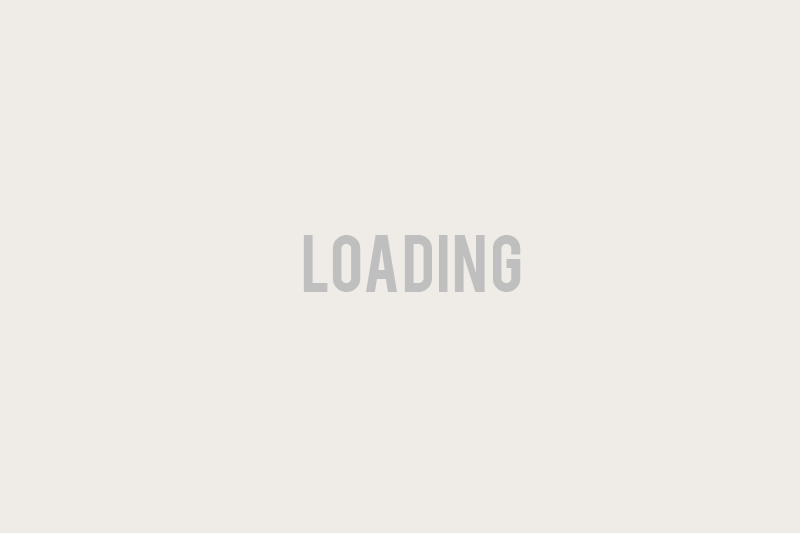
<style>
.page{position:relative;width:800px;height:533px;background:#efece7}
.page>*{position:absolute;margin:0}
.t1{font:64px "Bebas";color:#bfbfbf;text-transform:uppercase}
</style>
<div class="page">
<p class="t1" style="left:303px;top:235px;width:218px;height:57px">LOADING</p>
</div>
